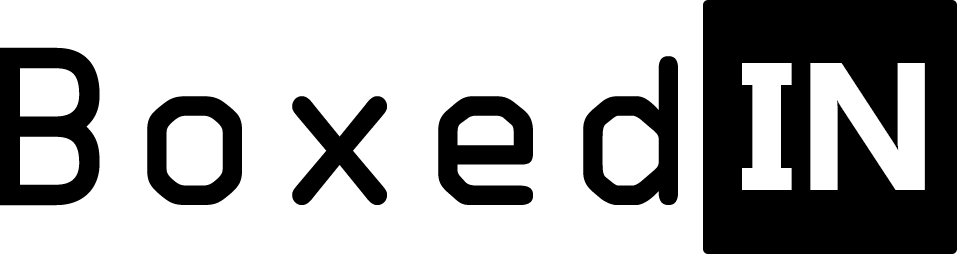
<style>
.page{position:relative;width:957px;height:254px;background:#ffffff}
.page>*{position:absolute;margin:0}
.t1{font:201.7px "OCRAStd";color:#000000}
.t2{font:181.3px "MyanmarText-Bold";color:#ffffff}
</style>
<div class="page">
<p class="t1" style="left:0px;top:47px;width:678px;height:159px">Boxed</p>
<p class="t2" style="left:742px;top:63px;width:183px;height:127px">IN</p>
</div>
